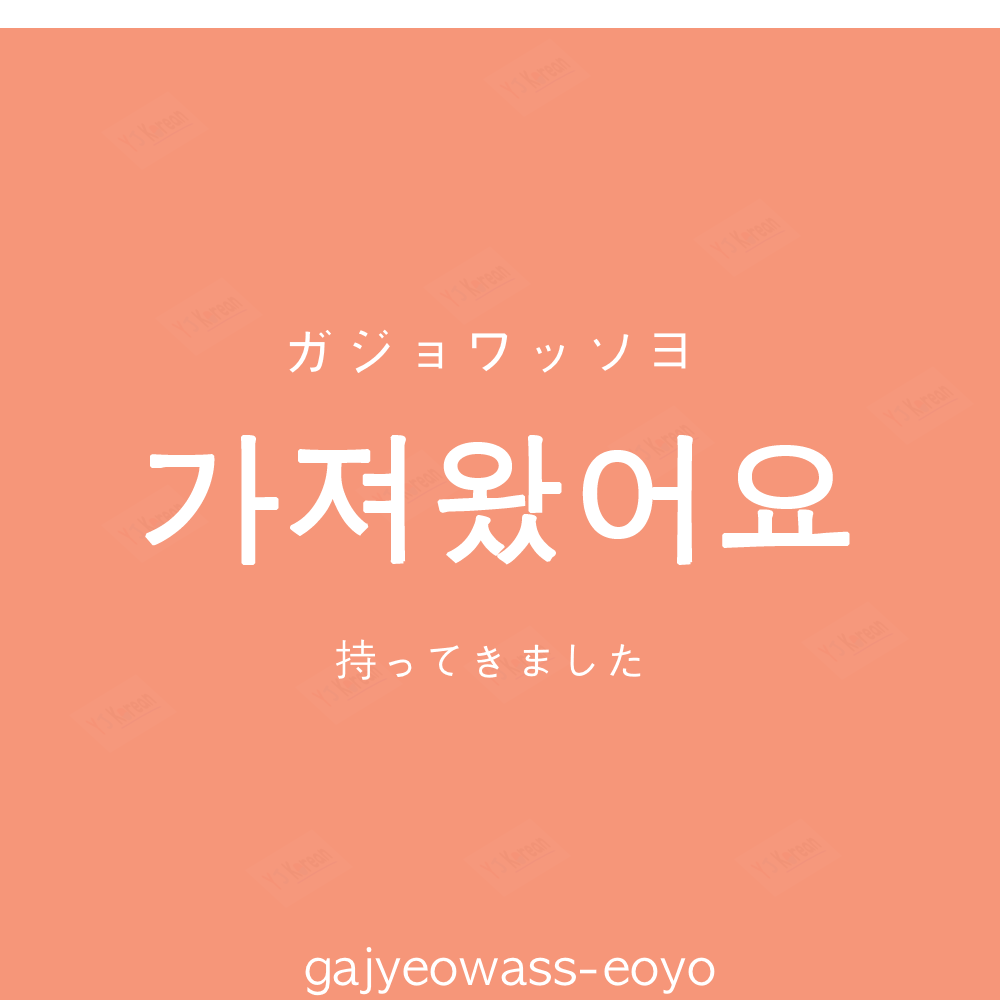
<style>
.page{position:relative;width:1000px;height:1000px;background:#f69679}
.page>*{position:absolute;margin:0}
.t1{font:60px "AppleGothic";color:#ffffff}
.t2{font:140px "AppleGothic";color:#ffffff;font-weight:bold}
.t3{font:45px "AppleGothic";color:#ffffff}
.t4{font:50px "AppleGothic";color:#ffffff}
</style>
<div class="page">
<p class="t1" style="left:289px;top:329px;width:397px;height:44px">ガジョワッソヨ</p>
<p class="t2" style="left:145px;top:435px;width:705px;height:130px">가져왔어요</p>
<p class="t3" style="left:336px;top:639px;width:305px;height:41px">持ってきました</p>
<p class="t4" style="left:305px;top:947px;width:410px;height:49px">gajyeowass-eoyo</p>
</div>
